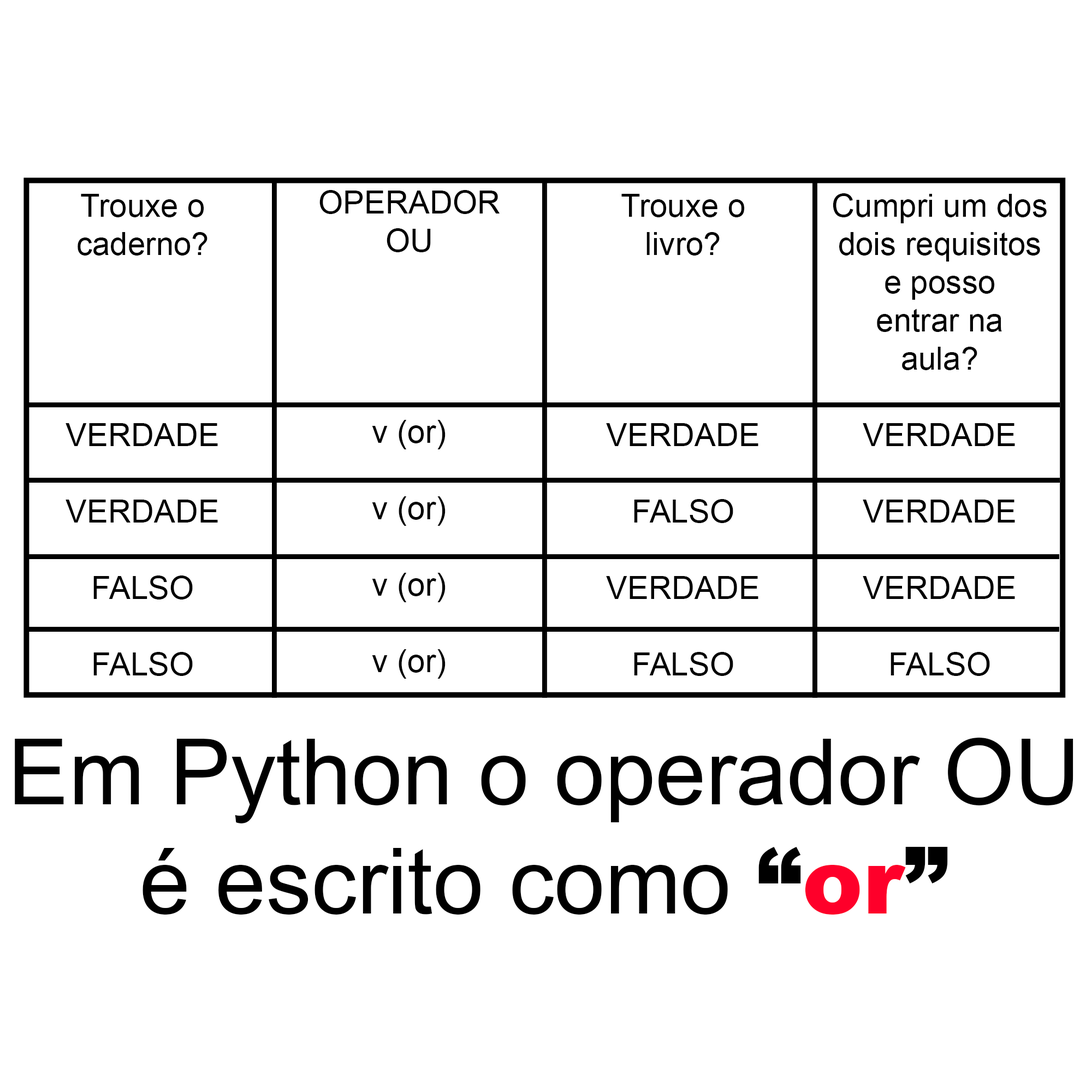
<style>
.page{position:relative;width:1092px;height:1092px;background:#ffffff}
.page>*{position:absolute;margin:0}
.t1{font:31.8px "ArialMT";color:#000000}
.t2{font:91px "ArialMT";color:#000000}
.t3{font:91px "Arial-Black";color:#000000}
.t4{font:91px "Arial-Black";color:#fe002a}
</style>
<div class="page">
<p class="t1" style="left:66px;top:194px;width:152px;height:482px;text-align:center">Trouxe o<br>caderno?<br><br><br><br><br>VERDADE<br><br>VERDADE<br><br>FALSO<br><br>FALSO</p>
<p class="t1" style="left:319px;top:190px;width:181px;height:489px;text-align:center">OPERADOR<br>OU<br><br><br><br><br>v (or)<br><br>v (or)<br><br>v (or)<br><br>v (or)</p>
<p class="t1" style="left:606px;top:194px;width:152px;height:482px;text-align:center">Trouxe o<br>livro?<br><br><br><br><br>VERDADE<br><br>FALSO<br><br>VERDADE<br><br>FALSO</p>
<p class="t1" style="left:833px;top:193px;width:214px;height:483px;text-align:center">Cumpri um dos<br>dois requisitos<br>e posso<br>entrar na<br>aula?<br><br>VERDADE<br><br>VERDADE<br><br>VERDADE<br><br>FALSO</p>
<p class="t2" style="left:15px;top:738px;width:1058px;height:177px;text-align:center">Em Python o operador OU<br>é escrito como <span class="t3">“</span><span class="t4">or</span><span class="t3">”</span></p>
</div>
